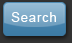
<style>
.page{position:relative;width:72px;height:43px}
.page>*{position:absolute;margin:0}
.t1{font:13.4px "ArialMT";letter-spacing:0.05em;color:#ffffff}
</style>
<div class="page">
<p class="t1" style="left:11px;top:12px;width:45px;height:10px">Search</p>
</div>
